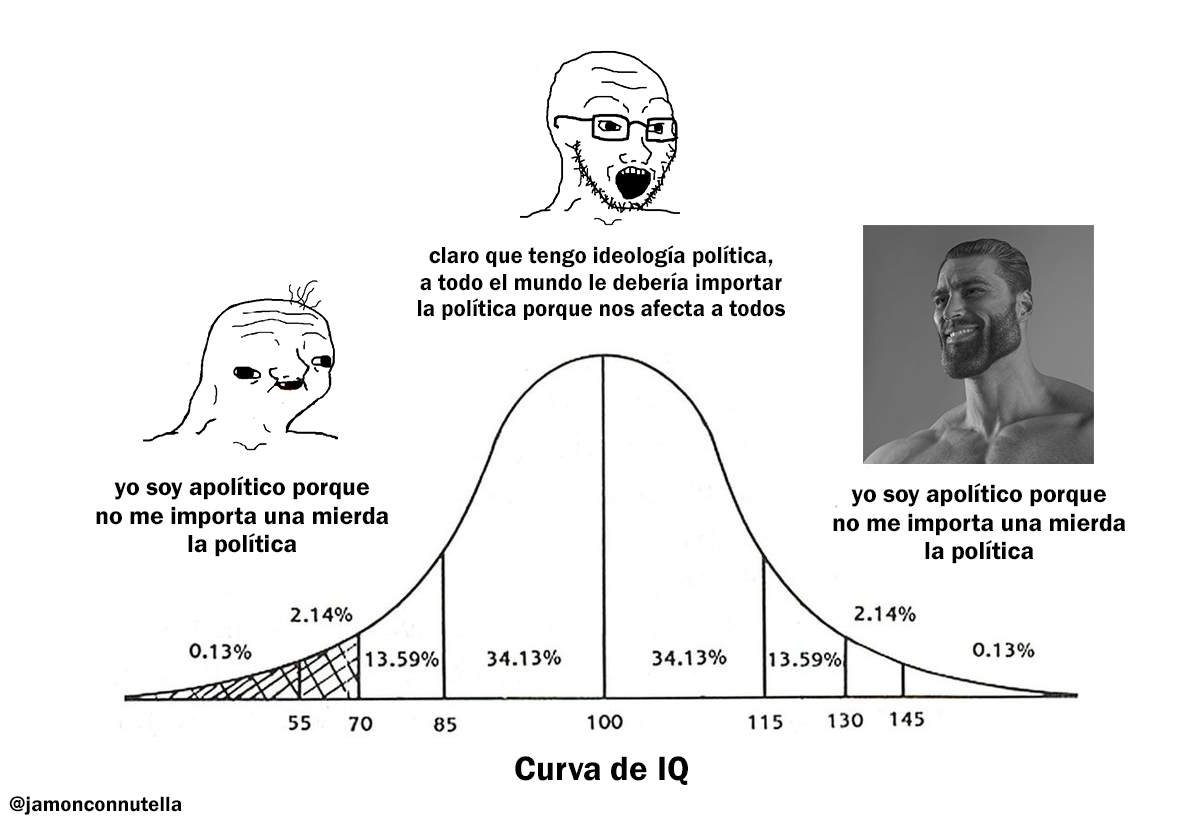
<style>
.page{position:relative;width:1200px;height:821px;background:#ffffff}
.page>*{position:absolute;margin:0}
.t1{font:23.9px "FranklinGothic-Demi";color:#000000;scale:0.97 1}
.t2{font:25.5px "FranklinGothic-Demi";color:#000000}
.t3{font:34.9px "FranklinGothic-Demi";color:#000000}
.t4{font:21.3px "FranklinGothic-Demi";color:#000000}
</style>
<div class="page">
<p class="t1" style="left:418px;top:245px;width:367px;height:75px;text-align:center">claro que tengo ideología política,<br>a todo el mundo le debería importar<br>la política porque nos afecta a todos</p>
<p class="t2" style="left:96px;top:476px;width:293px;height:81px;text-align:center">yo soy apolítico porque<br>no me importa una mierda<br>la política</p>
<p class="t2" style="left:833px;top:483px;width:293px;height:81px;text-align:center">yo soy apolítico porque<br>no me importa una mierda<br>la política</p>
<p class="t3" style="left:515px;top:756px;width:173px;height:29px">Curva de IQ</p>
<p class="t4" style="left:9px;top:796px;width:173px;height:19px">@jamonconnutella</p>
</div>
